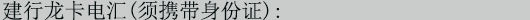
<style>
.page{position:relative;width:530px;height:20px;background:#cacbcb}
.page>*{position:absolute;margin:0}
.t1{font:20.8px "SimSun";color:#020e0e}
</style>
<div class="page">
<p class="t1" style="left:3px;top:0px;width:277px;height:21px">建行龙卡电汇(须携带身份证):</p>
</div>
